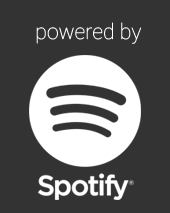
<style>
.page{position:relative;width:170px;height:213px;background:#333333}
.page>*{position:absolute;margin:0}
.t1{font:21.3px "Roboto-Thin";color:#ffffff}
</style>
<div class="page">
<p class="t1" style="left:36px;top:22px;width:106px;height:22px">powered by</p>
</div>
